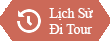
<style>
.page{position:relative;width:110px;height:41px;background:#cc6958}
.page>*{position:absolute;margin:0}
.t1{font:13.6px "TimesNewRomanPSMT";color:#fefefe}
</style>
<div class="page">
<p class="t1" style="left:49px;top:8px;width:44px;height:26px">Lịch Sử <br>Đi Tour</p>
</div>
